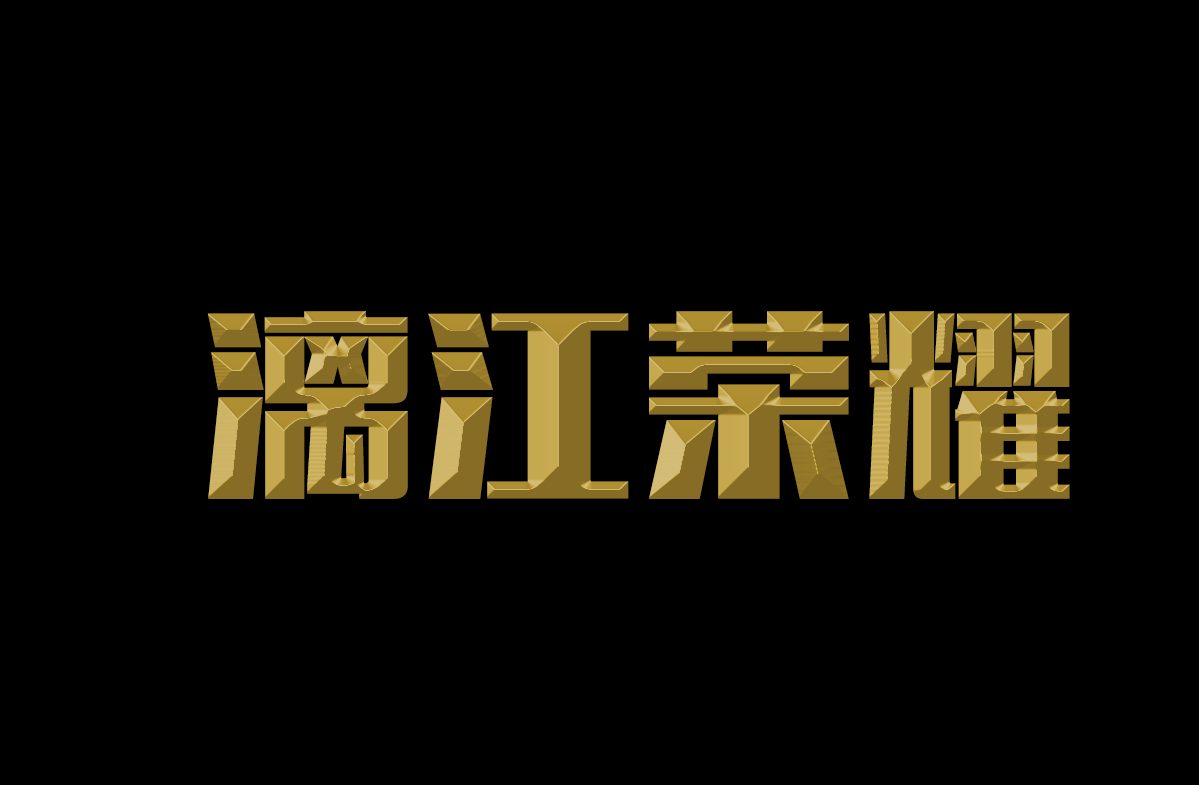
<style>
.page{position:relative;width:1199px;height:785px;background:#000000}
.page>*{position:absolute;margin:0}
.t1{font:208px "Tensentype-LanHeJ";letter-spacing:0.06em}
</style>
<div class="page">
<p class="t1" style="left:207px;top:311px;width:863px;height:188px">漓江荣耀</p>
</div>
